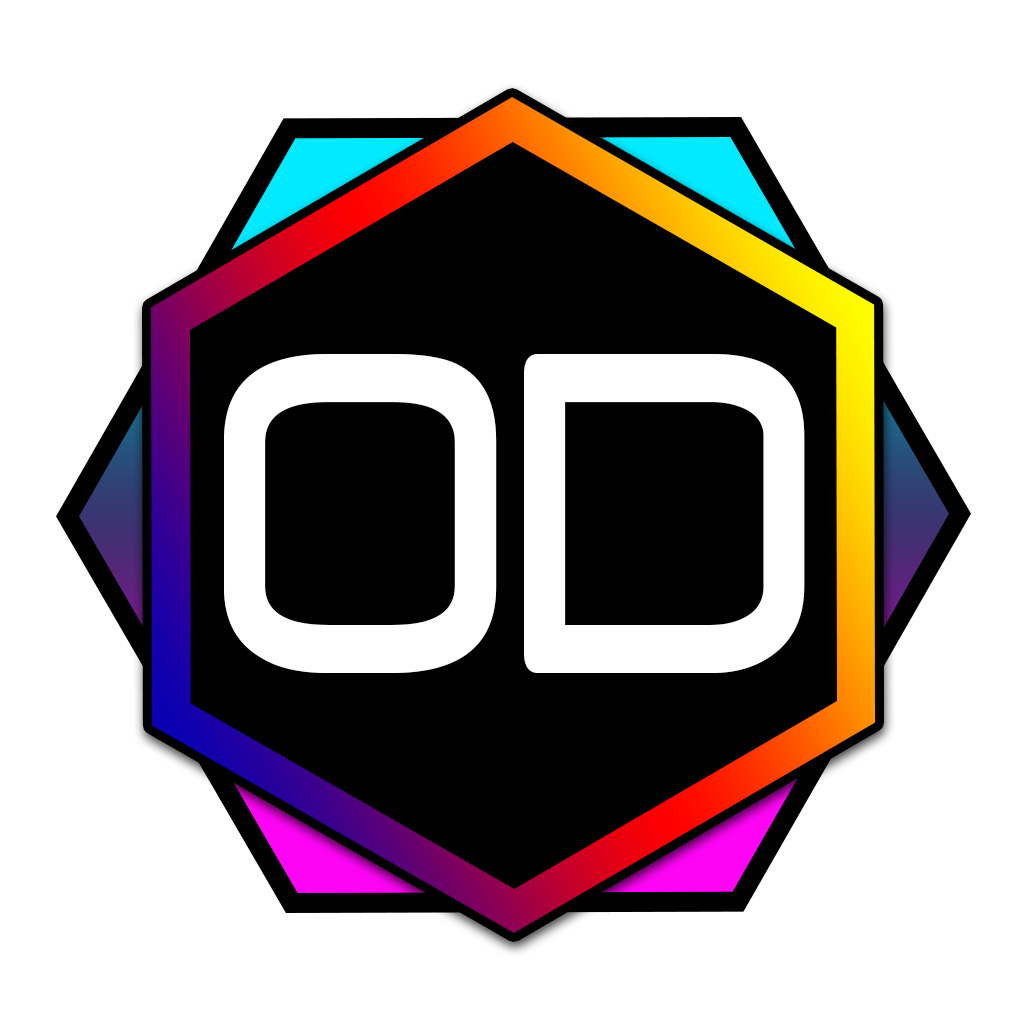
<style>
.page{position:relative;width:1034px;height:1033px;background:#ffffff}
.page>*{position:absolute;margin:0}
.t1{font:536px "Neuropol";color:#ffffff;scale:0.7 1}
</style>
<div class="page">
<p class="t1" style="left:224px;top:354px;width:581px;height:319px">OD</p>
</div>
